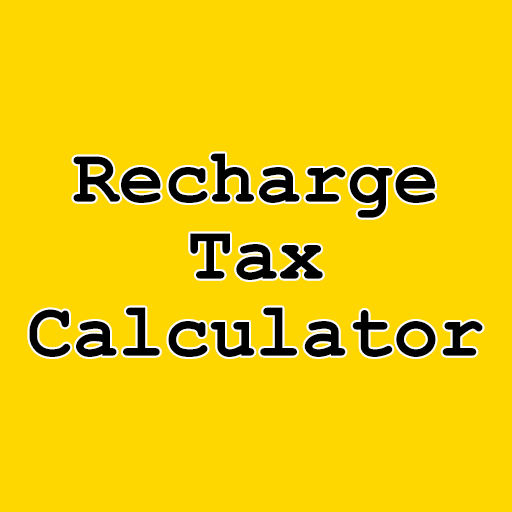
<style>
.page{position:relative;width:512px;height:512px;background:#ffd700}
.page>*{position:absolute;margin:0}
.t1{font:76.2px/77px "CourierNewPS-BoldMT";color:#000000}
</style>
<div class="page">
<p class="t1" style="left:29px;top:153px;width:454px;height:204px;text-align:center">Recharge<br>Tax<br>Calculator</p>
</div>
